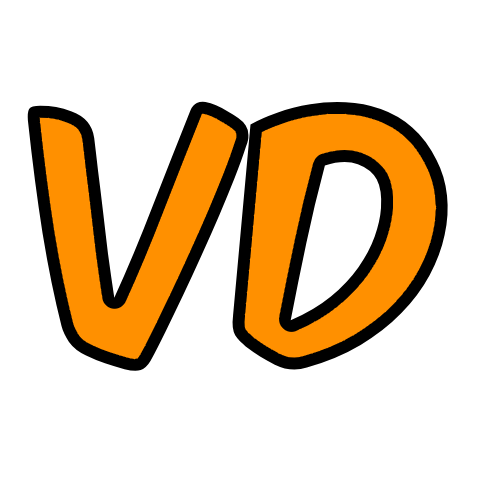
<style>
.page{position:relative;width:500px;height:500px;background:#ffffff}
.page>*{position:absolute;margin:0}
.t1{font:300px "KomikaAxis"}
</style>
<div class="page">
<p class="t1" style="left:27px;top:101px;width:423px;height:272px">VD</p>
</div>
